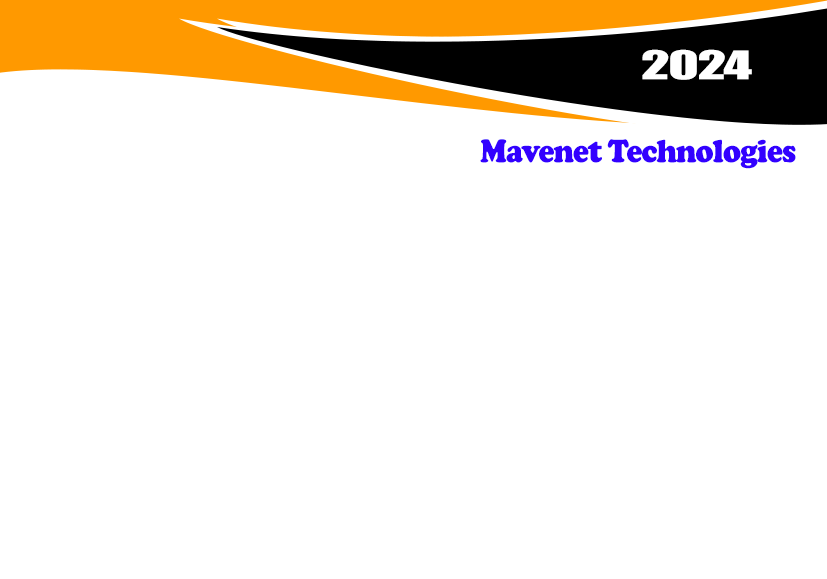
<style>
.page{position:relative;width:827px;height:579px;background:#ffffff}
.page>*{position:absolute;margin:0}
.t1{font:36.4px "Impact";letter-spacing:-0.025em;color:#ffffff;scale:1.57 1}
.t2{font:33.3px "CooperBlack";letter-spacing:-0.025em;color:#3300ff;scale:0.9 1}
</style>
<div class="page">
<p class="t1" style="left:642px;top:49px;width:110px;height:31px">2024</p>
<p class="t2" style="left:480px;top:139px;width:316px;height:30px">Mavenet Technologies</p>
</div>
